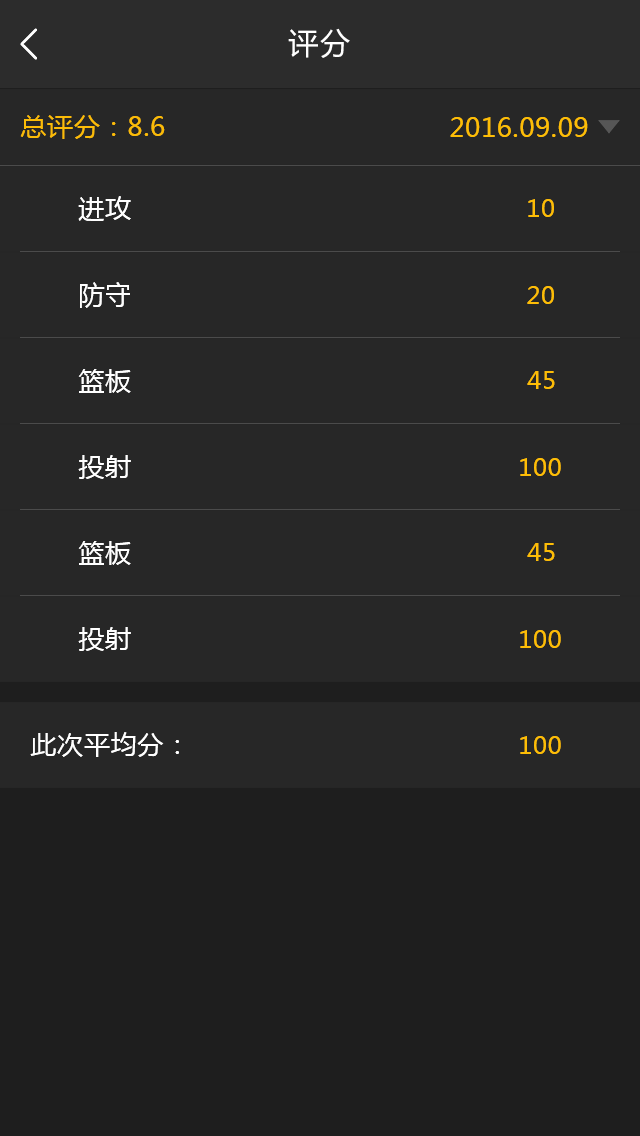
<style>
.page{position:relative;width:640px;height:1136px;background:#272727}
.page>*{position:absolute;margin:0}
.t1{font:30px "MicrosoftYaHei";letter-spacing:0.07em;color:#ffffff}
.t2{font:26px "MicrosoftYaHei";letter-spacing:0.03em;color:#fbbb07}
.t3{font:26px "MicrosoftYaHei";letter-spacing:0.03em;color:#fdbd06}
.t4{font:26px "MicrosoftYaHei";letter-spacing:0.03em;color:#ffffff}
.t5{font:24px "MicrosoftYaHei";letter-spacing:0.03em;color:#fdbd06}
</style>
<div class="page">
<p class="t1" style="left:288px;top:28px;width:62px;height:30px">评分</p>
<p class="t2" style="left:20px;top:115px;width:145px;height:24px">总评分：8.6</p>
<p class="t3" style="left:450px;top:117px;width:138px;height:20px">2016.09.09</p>
<p class="t4" style="left:78px;top:196px;width:53px;height:25px">进攻</p>
<p class="t5" style="left:528px;top:199px;width:26px;height:18px">10</p>
<p class="t4" style="left:80px;top:282px;width:50px;height:26px">防守</p>
<p class="t5" style="left:527px;top:286px;width:27px;height:18px">20</p>
<p class="t4" style="left:78px;top:369px;width:53px;height:24px">篮板</p>
<p class="t5" style="left:527px;top:371px;width:28px;height:18px">45</p>
<p class="t4" style="left:78px;top:455px;width:53px;height:24px">投射</p>
<p class="t5" style="left:520px;top:458px;width:41px;height:18px">100</p>
<p class="t4" style="left:78px;top:541px;width:53px;height:24px">篮板</p>
<p class="t5" style="left:527px;top:543px;width:28px;height:18px">45</p>
<p class="t4" style="left:78px;top:627px;width:53px;height:24px">投射</p>
<p class="t5" style="left:520px;top:630px;width:41px;height:18px">100</p>
<p class="t4" style="left:30px;top:732px;width:149px;height:25px">此次平均分：</p>
<p class="t5" style="left:520px;top:736px;width:41px;height:18px">100</p>
</div>
